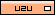
<style>
.page{position:relative;width:55px;height:15px;background:#ffaf7f}
.page>*{position:absolute;margin:0}
.t1{font:8px "BitDustTwo";color:#000000}
</style>
<div class="page">
<p class="t1" style="left:15px;top:6px;width:17px;height:5px">u2u</p>
</div>
